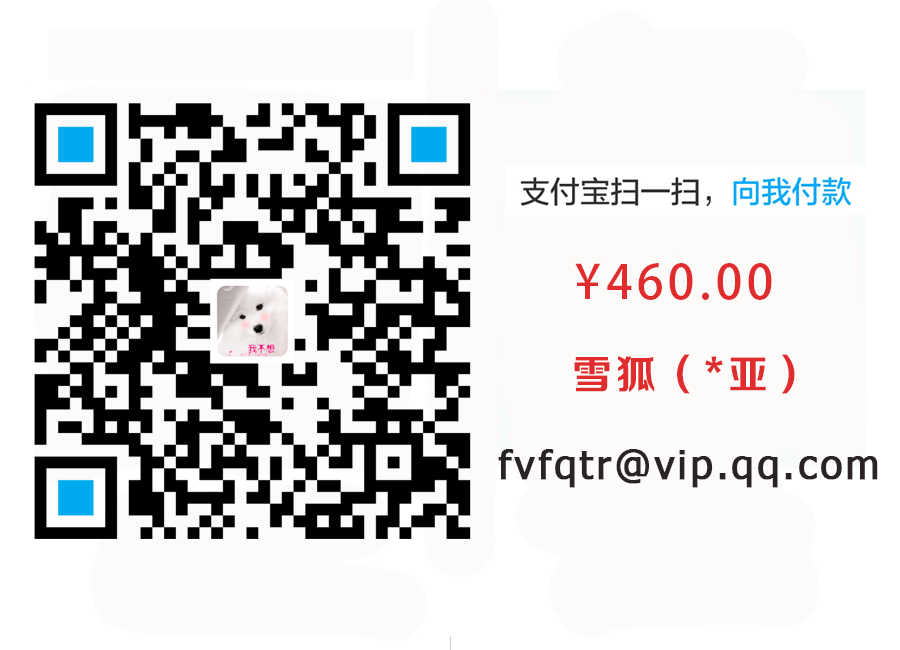
<style>
.page{position:relative;width:900px;height:650px;background:#fdfafa}
.page>*{position:absolute;margin:0}
.t1{font:47px "AdobeHeitiStd-Regular";letter-spacing:0.1em;color:#e02c2c}
.t2{font:40px "FZZCHJW--GB1-0";letter-spacing:0.1em;color:#e02c2c}
.t3{font:40px "Tahoma";letter-spacing:0.06em;color:#292323;font-weight:bold}
</style>
<div class="page">
<p class="t1" style="left:575px;top:263px;width:197px;height:37px">¥460.00</p>
<p class="t2" style="left:574px;top:354px;width:221px;height:40px">雪狐（*亚）</p>
<p class="t3" style="left:498px;top:449px;width:380px;height:39px">fvfqtr@vip.qq.com</p>
</div>
